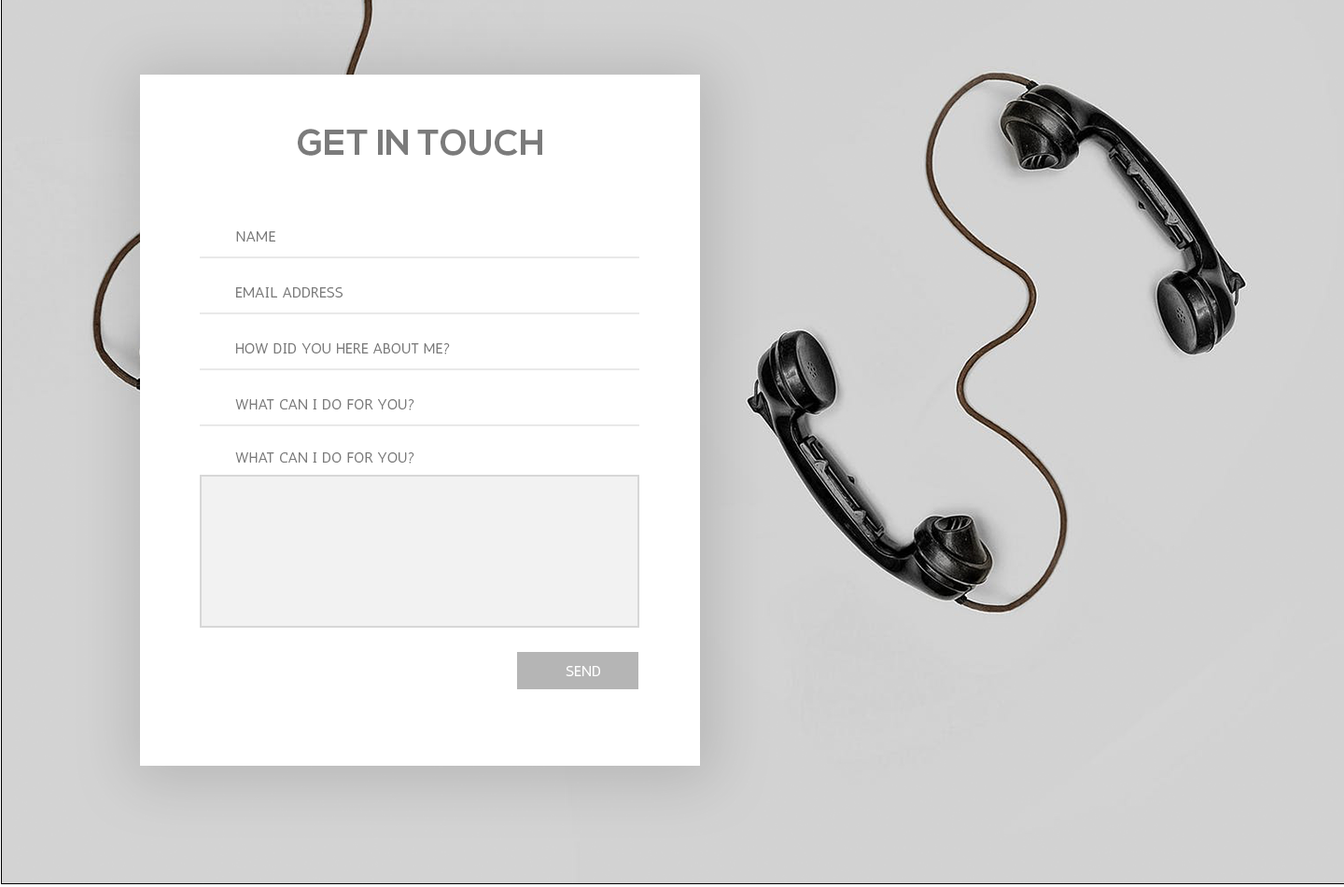
<style>
.page{position:relative;width:1344px;height:887px;background:#ffffff}
.page>*{position:absolute;margin:0}
.t1{font:35.7px "NexaBold";color:#7b7b7b}
.t2{font:14.9px "AnticSans";color:#7b7b7b}
.t3{font:14.9px "AnticSans";color:#ffffff}
</style>
<div class="page">
<p class="t1" style="left:298px;top:129px;width:244px;height:27px">GET IN TOUCH</p>
<p class="t2" style="left:236px;top:231px;width:39px;height:11px">NAME</p>
<p class="t2" style="left:236px;top:287px;width:106px;height:11px">EMAIL ADDRESS</p>
<p class="t2" style="left:236px;top:343px;width:214px;height:12px">HOW DID YOU HERE ABOUT ME?</p>
<p class="t2" style="left:235px;top:399px;width:179px;height:12px">WHAT CAN I DO FOR YOU?</p>
<p class="t2" style="left:235px;top:453px;width:179px;height:11px">WHAT CAN I DO FOR YOU?</p>
<p class="t3" style="left:565px;top:666px;width:35px;height:11px">SEND</p>
</div>
